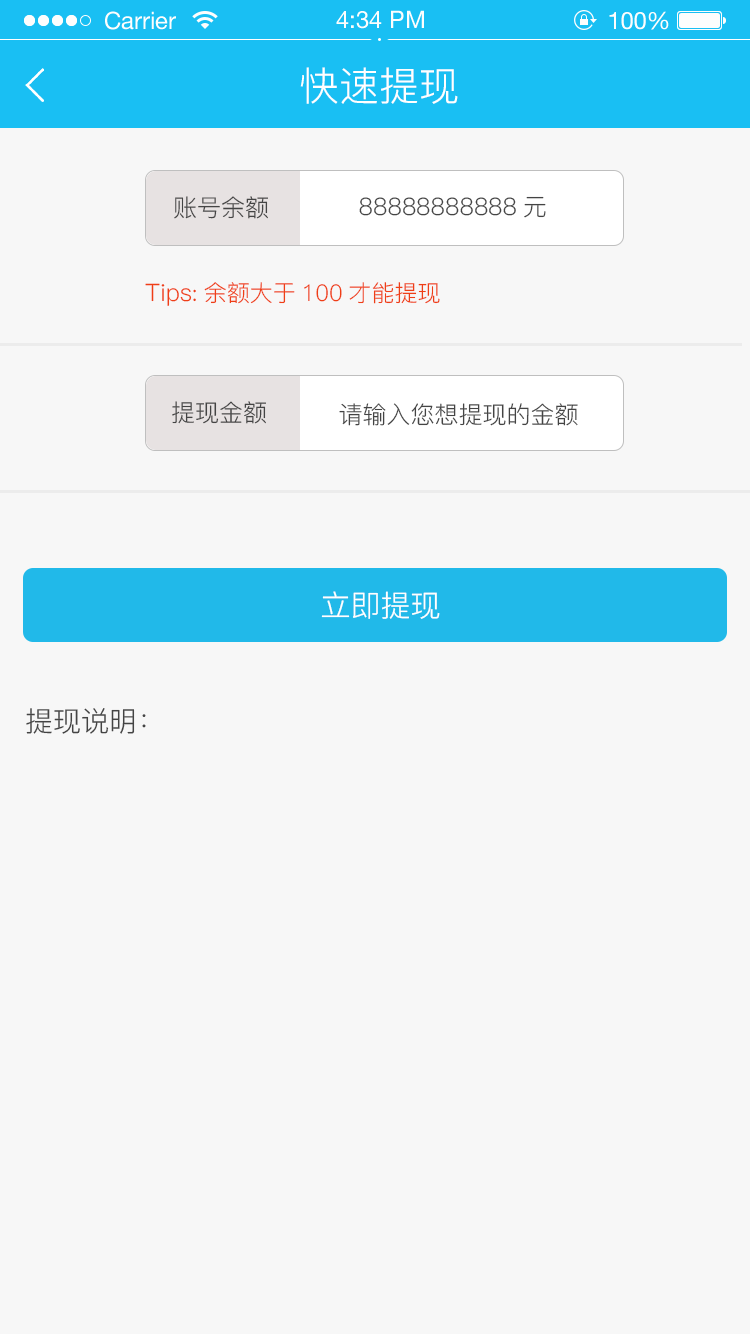
<style>
.page{position:relative;width:750px;height:1334px;background:#f7f7f7}
.page>*{position:absolute;margin:0}
.t1{font:40px "PingFang-SC-Regular";color:#ffffff}
.t2{font:24px "PingFang-SC-Regular";color:#444444}
.t3{font:23px "PingFang-SC-Regular";color:#ef3f16}
.t4{font:24px "PingFang-SC-Regular";color:#ef3f16}
.t5{font:30px "PingFang-SC-Regular";color:#ffffff}
.t6{font:28px "PingFang-SC-Regular";color:#444444}
</style>
<div class="page">
<p class="t1" style="left:300px;top:67px;width:158px;height:37px">快速提现</p>
<p class="t2" style="left:174px;top:196px;width:94px;height:23px">账号余额</p>
<p class="t2" style="left:359px;top:196px;width:187px;height:22px">88888888888元</p>
<p class="t3" style="left:145px;top:282px;width:295px;height:24px"><span class="t4">Tips:</span>余额大于100才能提现</p>
<p class="t2" style="left:172px;top:401px;width:94px;height:23px">提现金额</p>
<p class="t2" style="left:339px;top:403px;width:239px;height:23px">请输入您想提现的金额</p>
<p class="t5" style="left:321px;top:591px;width:119px;height:28px">立即提现</p>
<p class="t6" style="left:26px;top:708px;width:120px;height:26px">提现说明：</p>
</div>
